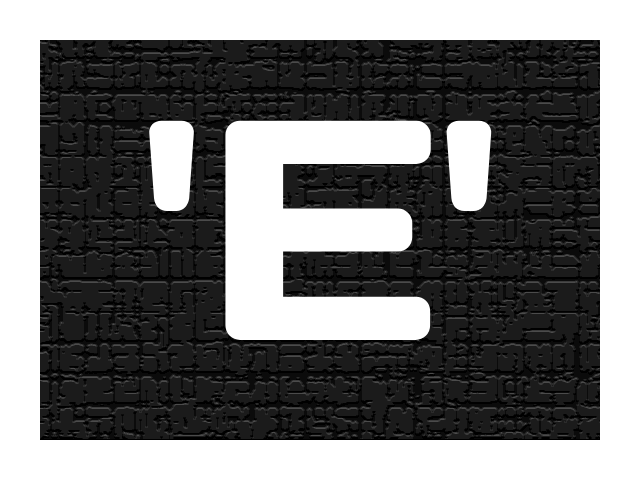
<style>
.page{position:relative;width:640px;height:480px;background:#ffffff}
.page>*{position:absolute;margin:0}
.t1{font:313.3px "DaysOne-Regular";color:#ffffff}
</style>
<div class="page">
<p class="t1" style="left:149px;top:120px;width:343px;height:220px">'E'</p>
</div>
